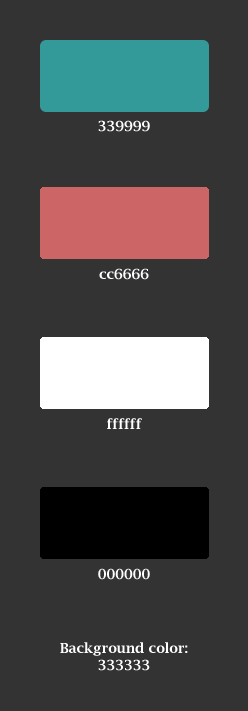
<style>
.page{position:relative;width:248px;height:711px;background:#333333}
.page>*{position:absolute;margin:0}
.t1{font:14px "LucidaBright-Demi";color:#ffffff}
</style>
<div class="page">
<p class="t1" style="left:98px;top:120px;width:52px;height:12px">339999</p>
<p class="t1" style="left:99px;top:268px;width:50px;height:12px">cc6666</p>
<p class="t1" style="left:107px;top:418px;width:35px;height:11px">ffffff</p>
<p class="t1" style="left:98px;top:568px;width:52px;height:12px">000000</p>
<p class="t1" style="left:60px;top:642px;width:128px;height:29px;text-align:center">Background color:<br>333333</p>
</div>
